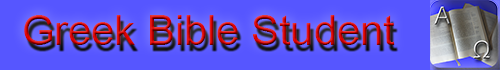
<style>
.page{position:relative;width:500px;height:70px;background:#5656ff}
.page>*{position:absolute;margin:0}
.t1{font:41.7px "ArialMT"}
</style>
<div class="page">
<p class="t1" style="left:24px;top:15px;width:371px;height:30px">Greek Bible Student</p>
</div>
